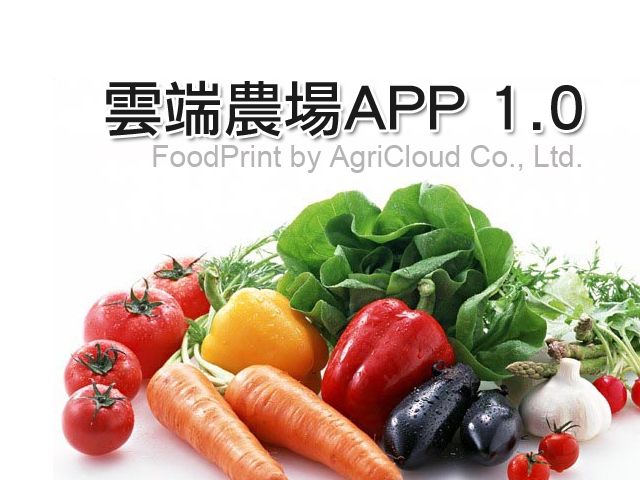
<style>
.page{position:relative;width:640px;height:480px;background:#ffffff}
.page>*{position:absolute;margin:0}
.t1{font:60px "LiHeiPro";color:#1b1b1b}
.t2{font:30px "ArialMT";color:#b5b5b5}
</style>
<div class="page">
<p class="t1" style="left:105px;top:80px;width:477px;height:57px">雲端農場APP 1.0</p>
<p class="t2" style="left:153px;top:145px;width:428px;height:28px">FoodPrint by AgriCloud Co., Ltd.</p>
</div>
